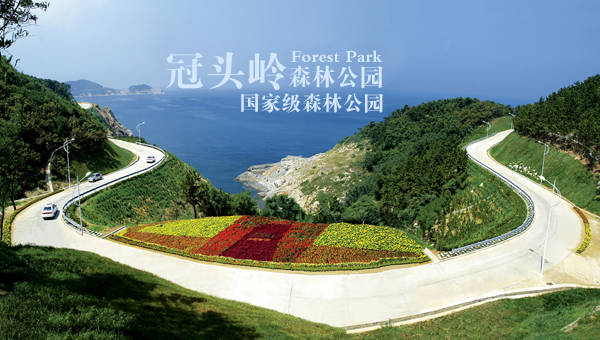
<style>
.page{position:relative;width:600px;height:340px}
.page>*{position:absolute;margin:0}
.t1{font:23.9px "FZDBSJW--GB1-0";color:#d3e7ff}
.t2{font:40.9px "FZDBSJW--GB1-0";color:#d3e7ff}
.t3{font:17.6px "FZDBSJW--GB1-0";color:#d3e7ff}
.t4{font:20.5px "FZDBSJW--GB1-0";color:#d3e7ff}
</style>
<div class="page">
<p class="t1" style="left:166px;top:52px;width:217px;height:38px"><span class="t2">冠头岭</span>森林公园</p>
<p class="t3" style="left:291px;top:50px;width:91px;height:12px">Forest Park</p>
<p class="t4" style="left:241px;top:93px;width:142px;height:20px">国家级森林公园</p>
</div>
